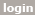
<style>
.page{position:relative;width:35px;height:15px;background:#afa9a4}
.page>*{position:absolute;margin:0}
.t1{font:11px "Verdana-Bold";color:#ffffff}
</style>
<div class="page">
<p class="t1" style="left:3px;top:3px;width:30px;height:11px">login</p>
</div>
